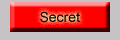
<style>
.page{position:relative;width:120px;height:40px;background:#c6c3c6}
.page>*{position:absolute;margin:0}
.t1{font:14px "ArialMT";color:#000000}
</style>
<div class="page">
<p class="t1" style="left:40px;top:11px;width:40px;height:12px">Secret</p>
</div>
